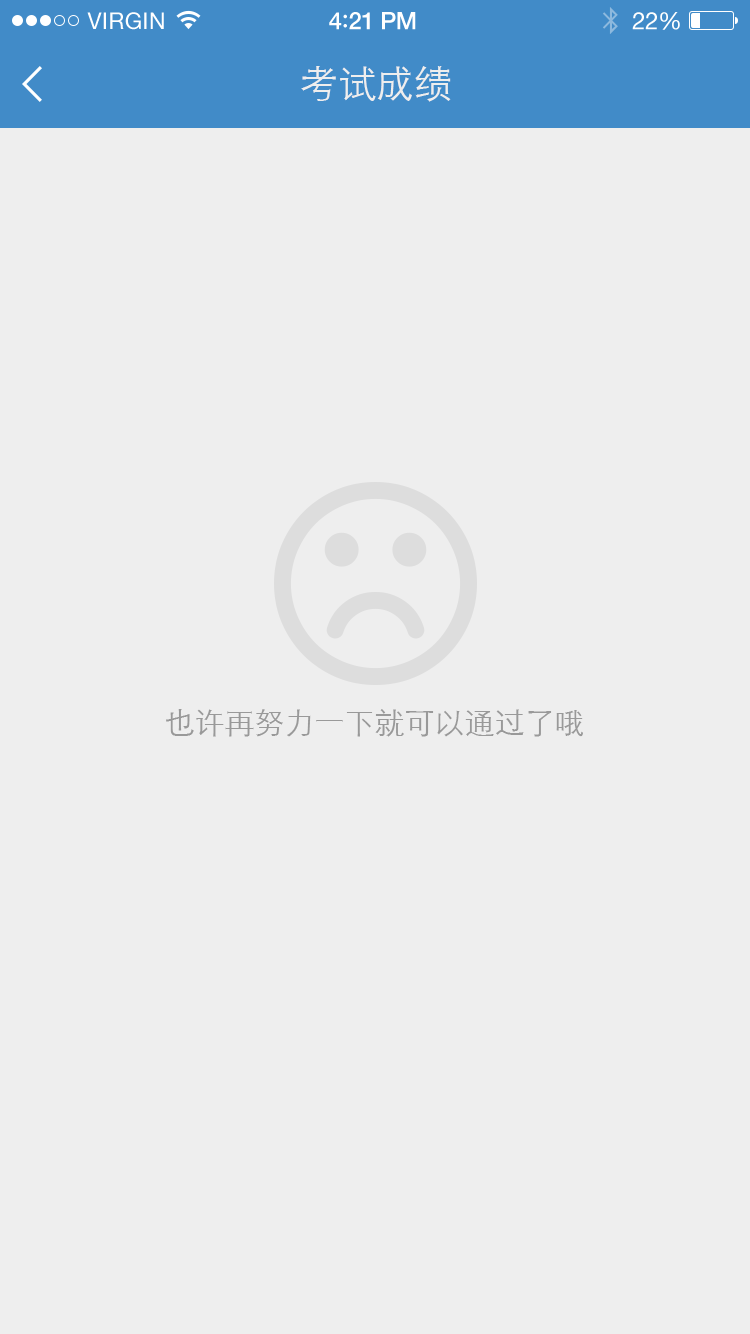
<style>
.page{position:relative;width:750px;height:1334px;background:#eeeeee}
.page>*{position:absolute;margin:0}
.t1{font:23px "HelveticaNeue";letter-spacing:0.02em;color:#ffffff}
.t2{font:24px "HelveticaNeue-Medium";letter-spacing:-0.02em;color:#ffffff}
.t3{font:26px "Avenir-Medium";letter-spacing:-0.02em;color:#ffffff}
.t4{font:24px "HelveticaNeue";letter-spacing:-0.02em;color:#ffffff}
.t5{font:38px "STXihei";color:#eeeeee}
.t6{font:30px "STXihei";color:#999999}
</style>
<div class="page">
<p class="t1" style="left:87px;top:12px;width:77px;height:18px">VIRGIN</p>
<p class="t2" style="left:329px;top:12px;width:87px;height:18px">4<span class="t3">:</span>21 PM</p>
<p class="t4" style="left:632px;top:12px;width:48px;height:18px">22%</p>
<p class="t5" style="left:301px;top:66px;width:150px;height:36px">考试成绩</p>
<p class="t6" style="left:166px;top:709px;width:417px;height:28px">也许再努力一下就可以通过了哦</p>
</div>
